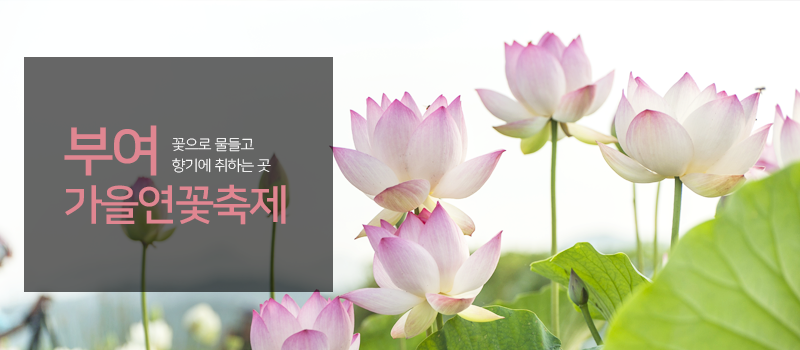
<style>
.page{position:relative;width:800px;height:350px}
.page>*{position:absolute;margin:0}
.t1{font:41.7px/50px "NanumSquare_acB";letter-spacing:-0.01em;color:#e08691;scale:1.05 1}
.t2{font:54.2px/50px "NanumSquare_acB";letter-spacing:-0.01em;color:#e08691;scale:1.05 1}
.t3{font:14.6px/20.8px "NanumSquare_acL";letter-spacing:-0.01em;color:#ffffff;scale:1.05 1}
</style>
<div class="page">
<p class="t1" style="left:64px;top:125px;width:222px;height:100px"><span class="t2">부여<br></span>가을연꽃축제</p>
<p class="t3" style="left:172px;top:138px;width:99px;height:35px">꽃으로 물들고<br>향기에 취하는 곳</p>
</div>
